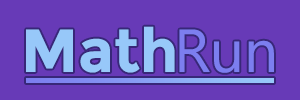
<style>
.page{position:relative;width:300px;height:100px;background:#673ab7}
.page>*{position:absolute;margin:0}
.t1{font:60.6px "Montserrat-Bold";color:#97c8f9}
.t2{font:60.6px "NirmalaUI";color:#7c7eef}
</style>
<div class="page">
<p class="t1" style="left:26px;top:26px;width:149px;height:47px">Math</p>
<p class="t2" style="left:179px;top:29px;width:95px;height:44px">Run</p>
</div>
